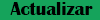
<style>
.page{position:relative;width:100px;height:20px;background:#15a35b}
.page>*{position:absolute;margin:0}
.t1{font:18.7px "BritannicBold";color:#000000}
</style>
<div class="page">
<p class="t1" style="left:10px;top:2px;width:83px;height:13px">Actualizar</p>
</div>
